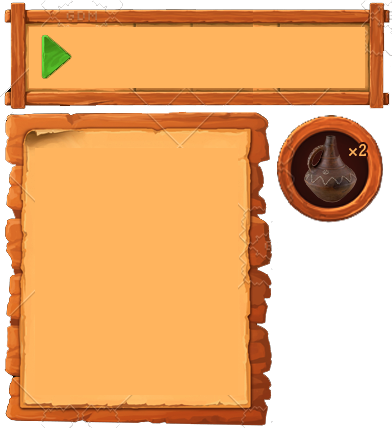
<style>
.page{position:relative;width:392px;height:428px;background:#ffb45e}
.page>*{position:absolute;margin:0}
.t1{font:18px "TektonPro-BoldCond";color:#ffb45e}
</style>
<div class="page">
<p class="t1" style="left:349px;top:144px;width:17px;height:13px">×2</p>
</div>
